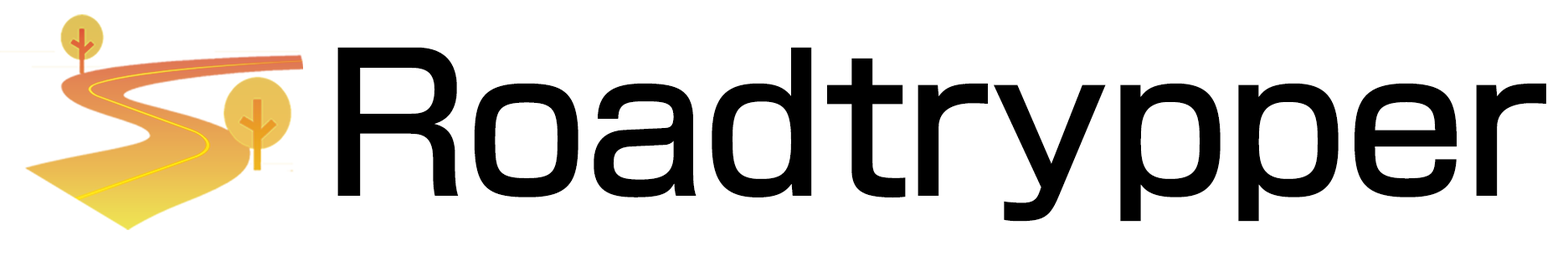
<style>
.page{position:relative;width:1568px;height:256px;background:#ffffff}
.page>*{position:absolute;margin:0}
.t1{font:188.4px "ShinGoPro-Medium";color:#000000}
</style>
<div class="page">
<p class="t1" style="left:337px;top:47px;width:1209px;height:175px">Roadtrypper</p>
</div>
